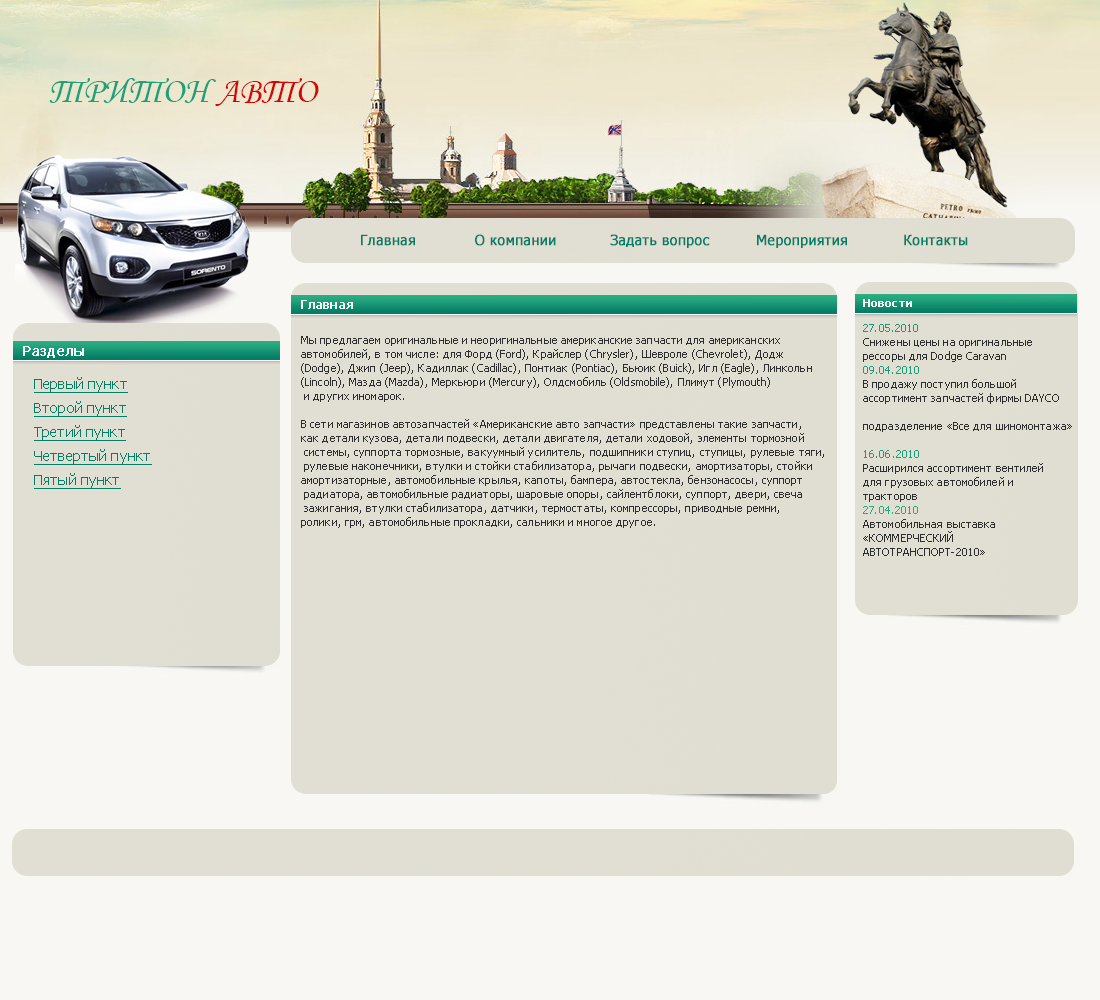
<style>
.page{position:relative;width:1100px;height:1000px;background:#f8f7f3}
.page>*{position:absolute;margin:0}
.t1{font:36px "MonotypeCorsiva";letter-spacing:0.01em;color:#1fa079}
.t2{font:36px "MonotypeCorsiva";letter-spacing:0.01em;color:#d40707}
.t3{font:14px "Tahoma";letter-spacing:0.01em;color:#037d64;font-weight:bold}
.t4{font:12px "Tahoma";letter-spacing:0.01em;color:#f8f7f3;font-weight:bold}
.t5{font:11px "Tahoma";letter-spacing:0.01em;color:#f8f7f3;font-weight:bold}
.t6{font:11px/14px "Tahoma";letter-spacing:0.01em;color:#2e2e2e}
.t7{font:11px/14px "Tahoma";letter-spacing:0.01em;color:#1b9974}
.t8{font:11px/14px "Tahoma";letter-spacing:0.01em;color:#1e9c77}
.t9{font:11px/14px "Tahoma";letter-spacing:0.01em;color:#27aa7e}
.t10{font:14px "Tahoma";letter-spacing:0.01em;color:#ffffff;font-weight:bold}
.t11{font:14px/24px "Tahoma";letter-spacing:0.01em;color:#037d64;text-decoration:underline}
</style>
<div class="page">
<p class="t1" style="left:49px;top:78px;width:270px;height:28px">ТРИТОН <span class="t2">АВТО</span></p>
<p class="t3" style="left:361px;top:234px;width:607px;height:14px">Главная            О компании           Задать вопрос         Мероприятия         Контакты</p>
<p class="t4" style="left:301px;top:300px;width:52px;height:9px">Главная</p>
<p class="t5" style="left:863px;top:299px;width:49px;height:8px">Новости</p>
<p class="t6" style="left:863px;top:324px;width:209px;height:232px"><span class="t7">27.05.2010  <br></span>Снижены цены на оригинальные <br>рессоры для Dodge Caravan<br><span class="t8">09.04.2010  <br></span>В продажу поступил большой <br>ассортимент запчастей фирмы DAYCO <br><br>подразделение «Все для шиномонтажа»<br><br><span class="t8">16.06.2010</span>  <br>Расширился ассортимент вентилей <br>для грузовых автомобилей и <br>тракторов<br><span class="t9">27.04.2010  <br></span>Автомобильная выставка <br>«КОММЕРЧЕСКИЙ <br>АВТОТРАНСПОРТ-2010»</p>
<p class="t6" style="left:301px;top:336px;width:523px;height:192px">Мы предлагаем оригинальные и неоригинальные американские запчасти для американских <br>автомобилей, в том числе: для Форд (Ford), Крайслер (Chrysler), Шевроле (Chevrolet), Додж <br>(Dodge), Джип (Jeep), Кадиллак (Cadillac), Понтиак (Pontiac), Бьюик (Buick), Игл (Eagle), Линкольн <br>(Lincoln), Мазда (Mazda), Меркьюри (Mercury), Олдсмобиль (Oldsmobile), Плимут (Plymouth)<br> и других иномарок. <br><br>В сети магазинов автозапчастей «Американские авто запчасти» представлены такие запчасти, <br>как детали кузова, детали подвески, детали двигателя, детали ходовой, элементы тормозной<br> системы, суппорта тормозные, вакуумный усилитель, подшипники ступиц, ступицы, рулевые тяги,<br> рулевые наконечники, втулки и стойки стабилизатора, рычаги подвески, амортизаторы, стойки <br>амортизаторные, автомобильные крылья, капоты, бампера, автостекла, бензонасосы, суппорт<br> радиатора, автомобильные радиаторы, шаровые опоры, сайлентблоки, суппорт, двери, свеча<br> зажигания, втулки стабилизатора, датчики, термостаты, компрессоры, приводные ремни, <br>ролики, грм, автомобильные прокладки, сальники и многое другое.</p>
<p class="t10" style="left:23px;top:346px;width:61px;height:12px">Разделы</p>
<p class="t11" style="left:34px;top:377px;width:118px;height:112px">Первый пункт<br>Второй пункт<br>Третий пункт<br>Четвертый пункт<br>Пятый пункт</p>
</div>
